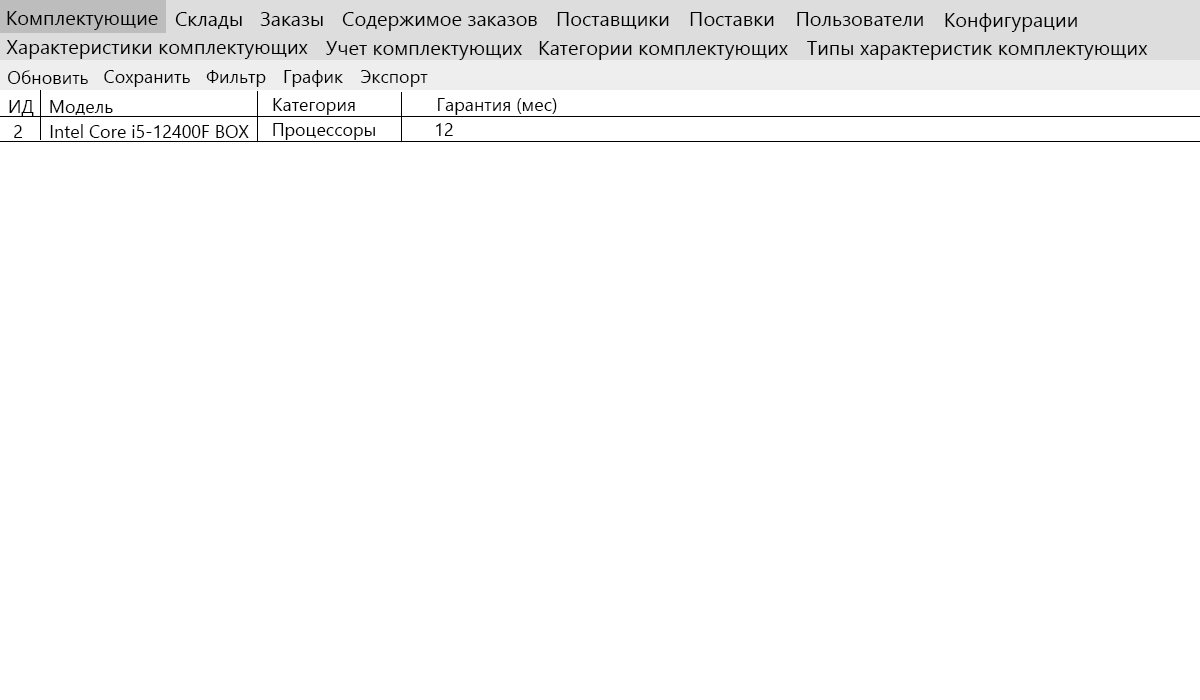
<style>
.page{position:relative;width:1200px;height:700px;background:#ffffff}
.page>*{position:absolute;margin:0}
.t1{font:20px "SegoeUI";color:#000000}
.t2{font:18px "SegoeUI";color:#000000}
</style>
<div class="page">
<p class="t1" style="left:7px;top:11px;width:151px;height:19px">Комплектующие</p>
<p class="t1" style="left:175px;top:12px;width:67px;height:17px">Склады</p>
<p class="t1" style="left:260px;top:12px;width:63px;height:14px">Заказы</p>
<p class="t1" style="left:342px;top:12px;width:195px;height:19px">Содержимое заказов</p>
<p class="t1" style="left:557px;top:12px;width:112px;height:17px">Поставщики</p>
<p class="t1" style="left:690px;top:12px;width:84px;height:14px">Поставки</p>
<p class="t1" style="left:797px;top:12px;width:126px;height:14px">Пользователи</p>
<p class="t1" style="left:945px;top:13px;width:132px;height:19px">Конфигурации</p>
<p class="t1" style="left:6px;top:40px;width:302px;height:19px">Характеристики комплектующих</p>
<p class="t1" style="left:326px;top:41px;width:196px;height:19px">Учет комплектующих</p>
<p class="t1" style="left:539px;top:41px;width:249px;height:19px">Категории комплектующих</p>
<p class="t1" style="left:807px;top:41px;width:341px;height:19px">Типы характеристик комплектующих</p>
<p class="t2" style="left:8px;top:70px;width:80px;height:14px">Обновить</p>
<p class="t2" style="left:104px;top:70px;width:86px;height:17px">Сохранить</p>
<p class="t2" style="left:206px;top:70px;width:60px;height:17px">Фильтр</p>
<p class="t2" style="left:284px;top:70px;width:59px;height:17px">График</p>
<p class="t2" style="left:361px;top:70px;width:67px;height:17px">Экспорт</p>
<p class="t2" style="left:9px;top:100px;width:25px;height:16px">ИД</p>
<p class="t2" style="left:50px;top:100px;width:63px;height:15px">Модель</p>
<p class="t2" style="left:273px;top:98px;width:82px;height:17px">Категория</p>
<p class="t2" style="left:438px;top:98px;width:119px;height:17px">Гарантия (мес)</p>
<p class="t2" style="left:14px;top:125px;width:9px;height:13px">2</p>
<p class="t2" style="left:50px;top:124px;width:199px;height:14px">Intel Core i5-12400F BOX</p>
<p class="t2" style="left:273px;top:123px;width:102px;height:17px">Процессоры</p>
<p class="t2" style="left:436px;top:123px;width:17px;height:13px">12</p>
</div>
